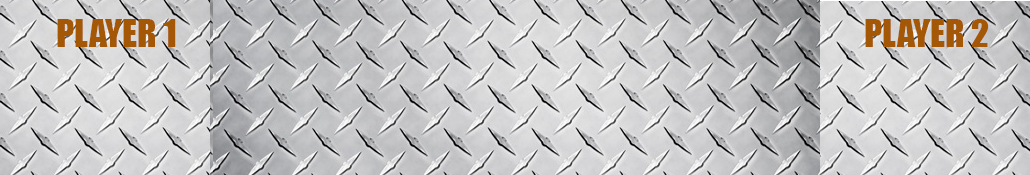
<style>
.page{position:relative;width:1030px;height:175px}
.page>*{position:absolute;margin:0}
.t1{font:36px "Impact";color:#a45705}
</style>
<div class="page">
<p class="t1" style="left:57px;top:19px;width:119px;height:28px">PLAYER 1</p>
<p class="t1" style="left:865px;top:19px;width:124px;height:28px">PLAYER 2</p>
</div>
